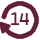
<style>
.page{position:relative;width:40px;height:40px;background:#ffffff}
.page>*{position:absolute;margin:0}
.t1{font:18px "CascadiaCode-Roman";letter-spacing:-0.075em;color:#651e38}
</style>
<div class="page">
<p class="t1" style="left:11px;top:12px;width:18px;height:14px">14</p>
</div>
